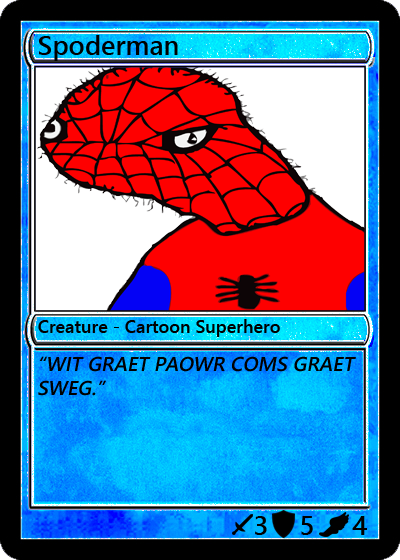
<style>
.page{position:relative;width:400px;height:560px}
.page>*{position:absolute;margin:0}
.t1{font:27px "YuGothicUI-Semibold";color:#000000}
.t2{font:18px "YuGothicUI-Semibold";color:#000000}
.t3{font:20px "YuGothicUI-Semibold";color:#000000;font-style:italic}
</style>
<div class="page">
<p class="t1" style="left:39px;top:35px;width:139px;height:26px">Spoderman</p>
<p class="t2" style="left:38px;top:319px;width:242px;height:18px">Creature - Cartoon Superhero</p>
<p class="t3" style="left:38px;top:356px;width:318px;height:40px">“WIT GRAET PAOWR COMS GRAET SWEG.”</p>
<p class="t1" style="left:255px;top:516px;width:12px;height:19px">3</p>
<p class="t1" style="left:301px;top:516px;width:12px;height:19px">5</p>
<p class="t1" style="left:352px;top:516px;width:15px;height:19px">4</p>
</div>
